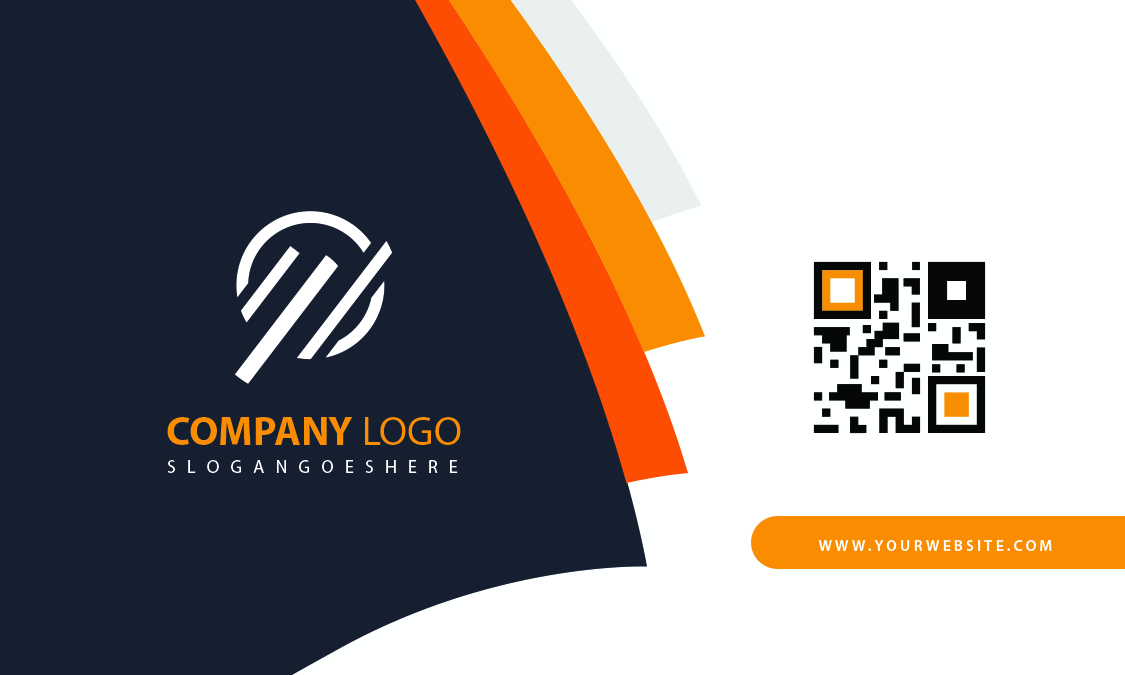
<style>
.page{position:relative;width:1125px;height:675px;background:#161f30}
.page>*{position:absolute;margin:0}
.t1{font:40.9px "MyriadPro-Bold";color:#f98c00}
.t2{font:40.9px "MyriadPro-Regular";color:#f98c00}
.t3{font:18.1px "MyriadPro-Regular";letter-spacing:0.2em;color:#ffffff}
.t4{font:15.6px "MyriadPro-Semibold";letter-spacing:0.2em;color:#ffffff}
</style>
<div class="page">
<p class="t1" style="left:167px;top:417px;width:294px;height:28px">COMPANY<span class="t2"> LOGO</span></p>
<p class="t3" style="left:167px;top:460px;width:291px;height:13px">S L O G A N G O E S H E R E</p>
<p class="t4" style="left:818px;top:540px;width:234px;height:11px">WWW.YOURWEBSITE.COM</p>
</div>
